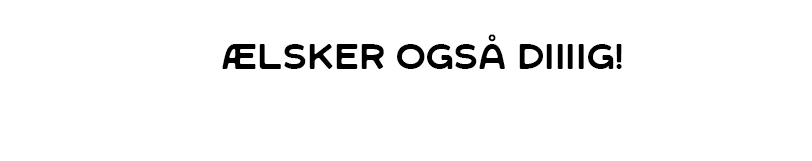
<style>
.page{position:relative;width:812px;height:161px;background:#ffffff}
.page>*{position:absolute;margin:0}
.t1{font:35.4px "SFCWosterSans-Regular";color:#000000}
</style>
<div class="page">
<p class="t1" style="left:222px;top:34px;width:400px;height:35px">Ælsker også diiiig!</p>
</div>
